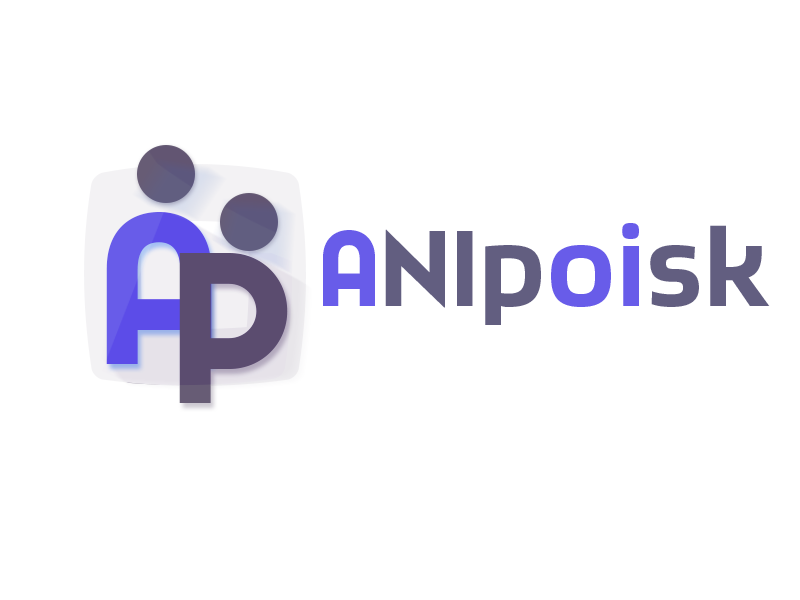
<style>
.page{position:relative;width:800px;height:600px;background:#ffffff}
.page>*{position:absolute;margin:0}
.t1{font:200px "PontiacInlineShadow";color:#685ce9}
.t2{font:100px "PontiacInlineShadow";color:#625e80}
.t3{font:100px "PontiacInlineShadow";color:#685ce9}
.t4{font:100px "BruumFY-Bold";color:#625e80}
.t5{font:100px "BruumFY-Bold";color:#685ce9}
.t6{font:200px "PontiacInlineShadow";color:#675c75}
</style>
<div class="page">
<p class="t1" style="left:106px;top:212px;width:106px;height:152px">A</p>
<p class="t2" style="left:323px;top:223px;width:447px;height:102px"><span class="t3">A</span>ni<span class="t4">p</span><span class="t5">oi</span><span class="t4">sk</span></p>
<p class="t6" style="left:179px;top:253px;width:109px;height:150px">P</p>
</div>
